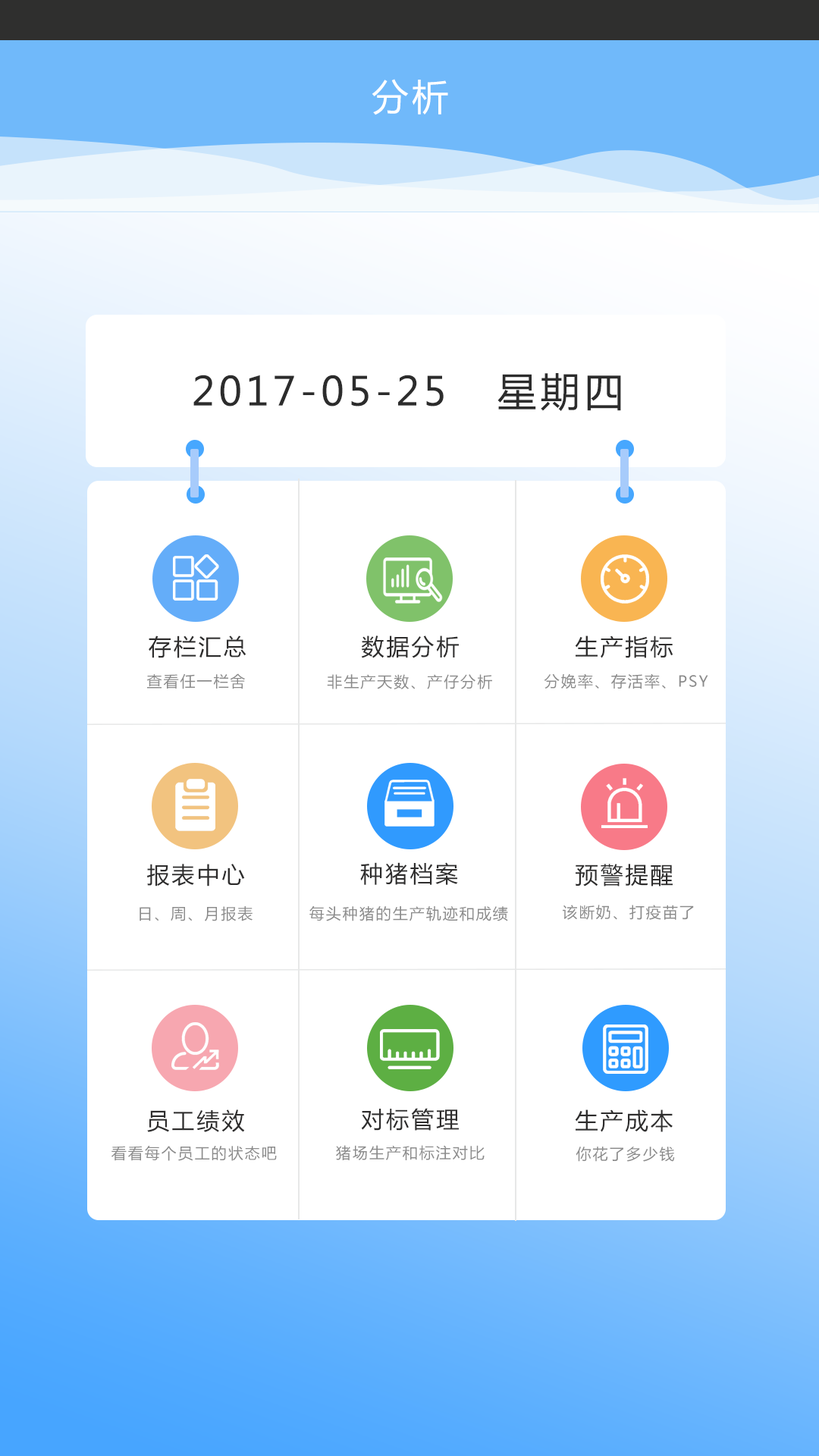
<style>
.page{position:relative;width:819px;height:1456px;background:#ffffff}
.page>*{position:absolute;margin:0}
.t1{font:36.4px "MicrosoftYaHei";letter-spacing:0.1em;color:#ffffff}
.t2{font:39.4px "MicrosoftYaHei";letter-spacing:0.1em;color:#2c2c2c}
.t3{font:22.7px "MicrosoftYaHei";letter-spacing:0.1em;color:#2e2d2d}
.t4{font:15.2px "MicrosoftYaHei";letter-spacing:0.1em;color:#8b8b8b}
</style>
<div class="page">
<p class="t1" style="left:372px;top:79px;width:76px;height:36px">分析</p>
<p class="t2" style="left:193px;top:373px;width:428px;height:38px">2017-05-25   星期四</p>
<p class="t3" style="left:149px;top:635px;width:97px;height:23px">存栏汇总</p>
<p class="t3" style="left:361px;top:635px;width:98px;height:23px">数据分析</p>
<p class="t3" style="left:575px;top:635px;width:98px;height:23px">生产指标</p>
<p class="t4" style="left:146px;top:673px;width:99px;height:16px">查看任一栏舍</p>
<p class="t4" style="left:327px;top:674px;width:165px;height:15px">非生产天数、产仔分析</p>
<p class="t4" style="left:544px;top:673px;width:164px;height:16px">分娩率、存活率、PSY</p>
<p class="t3" style="left:147px;top:864px;width:98px;height:22px">报表中心</p>
<p class="t3" style="left:360px;top:862px;width:98px;height:23px">种猪档案</p>
<p class="t3" style="left:576px;top:864px;width:97px;height:22px">预警提醒</p>
<p class="t4" style="left:563px;top:905px;width:131px;height:15px">该断奶、打疫苗了</p>
<p class="t4" style="left:140px;top:906px;width:113px;height:15px">日、周、月报表</p>
<p class="t4" style="left:309px;top:906px;width:199px;height:15px">每头种猪的生产轨迹和成绩</p>
<p class="t3" style="left:147px;top:1109px;width:98px;height:23px">员工绩效</p>
<p class="t3" style="left:361px;top:1108px;width:98px;height:23px">对标管理</p>
<p class="t3" style="left:575px;top:1109px;width:98px;height:23px">生产成本</p>
<p class="t4" style="left:111px;top:1146px;width:166px;height:15px">看看每个员工的状态吧</p>
<p class="t4" style="left:336px;top:1145px;width:149px;height:15px">猪场生产和标注对比</p>
<p class="t4" style="left:576px;top:1147px;width:99px;height:15px">你花了多少钱</p>
</div>
